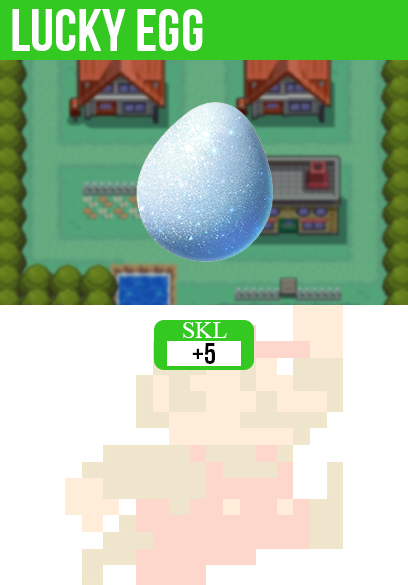
<style>
.page{position:relative;width:408px;height:585px;background:#ffffff}
.page>*{position:absolute;margin:0}
.t1{font:60px "BebasNeue";color:#ffffff}
.t2{font:24px "TimesNewRomanPSMT";color:#ffffff}
.t3{font:30px "BebasNeue";color:#000000}
</style>
<div class="page">
<p class="t1" style="left:12px;top:9px;width:191px;height:42px">lucky egg</p>
<p class="t2" style="left:183px;top:322px;width:44px;height:16px">SKL</p>
<p class="t3" style="left:192px;top:343px;width:23px;height:21px">+5</p>
</div>
